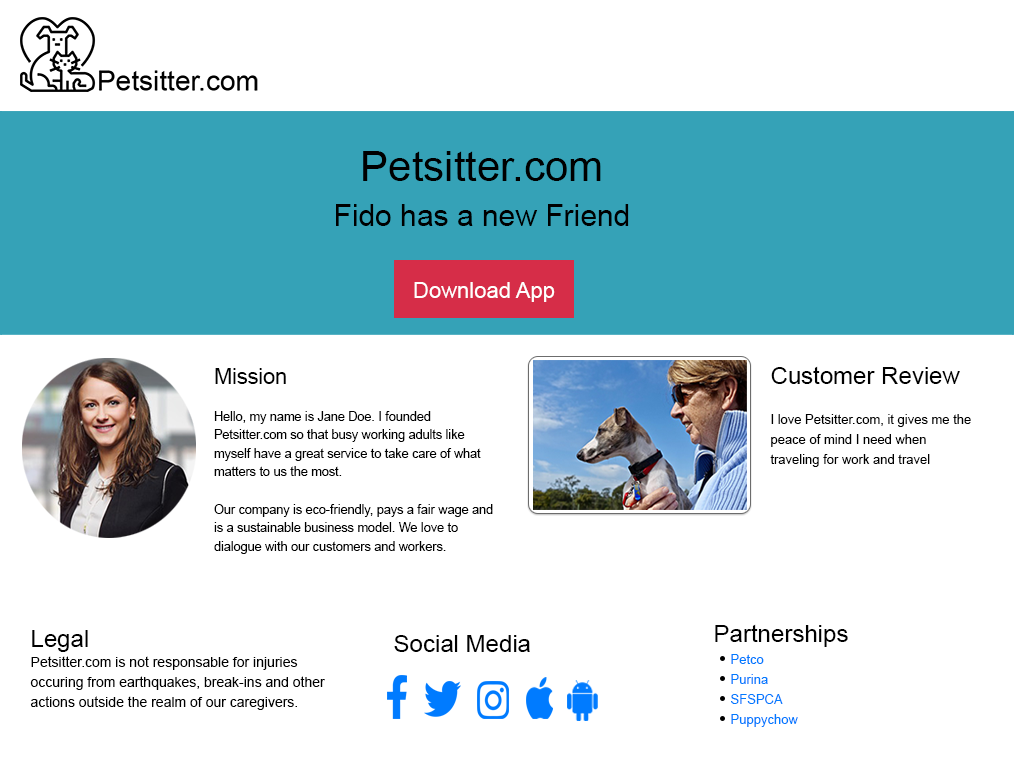
<style>
.page{position:relative;width:1014px;height:774px;background:#ffffff}
.page>*{position:absolute;margin:0}
.t1{font:42px "ArialMT";color:#000000}
.t2{font:30px "ArialMT";color:#000000}
.t3{font:22px "ArialMT";color:#ffffff}
.t4{font:13px/20px "ArialMT";color:#000000}
.t5{font:24px/20px "ArialMT";color:#000000}
.t6{font:13px/18.6px "ArialMT";color:#000000;scale:0.97 1}
.t7{font:22.3px/18.6px "ArialMT";color:#000000;scale:0.97 1}
.t8{font:14px/20px "ArialMT";color:#000000}
.t9{font:24px "ArialMT";color:#000000}
.t10{font:13px/20px "ArialMT";color:#007bff}
</style>
<div class="page">
<p class="t1" style="left:363px;top:151px;width:238px;height:30px">Petsitter.com</p>
<p class="t2" style="left:336px;top:204px;width:293px;height:22px">Fido has a new Friend</p>
<p class="t3" style="left:414px;top:282px;width:141px;height:20px">Download App</p>
<p class="t4" style="left:770px;top:366px;width:201px;height:101px"><span class="t5">Customer Review<br><br></span>I love Petsitter.com, it gives me the peace of mind I need when traveling for work and travel</p>
<p class="t6" style="left:214px;top:368px;width:279px;height:186px"><span class="t7">Mission<br></span><br>Hello, my name is Jane Doe. I founded Petsitter.com so that busy working adults like myself have a great service to take care of what matters to us the most.<br><br>Our company is eco-friendly, pays a fair wage and is a sustainable business model. We love to dialogue with our customers and workers.</p>
<p class="t8" style="left:30px;top:630px;width:295px;height:80px"><span class="t5">Legal<br></span>Petsitter.com is not responsable for injuries occuring from earthquakes, break-ins and other actions outside the realm of our caregivers.</p>
<p class="t9" style="left:715px;top:624px;width:133px;height:23px">Partnerships</p>
<p class="t9" style="left:394px;top:635px;width:136px;height:17px">Social Media</p>
<p class="t10" style="left:731px;top:654px;width:67px;height:73px">Petco<br>Purina<br>SFSPCA<br>Puppychow</p>
</div>
